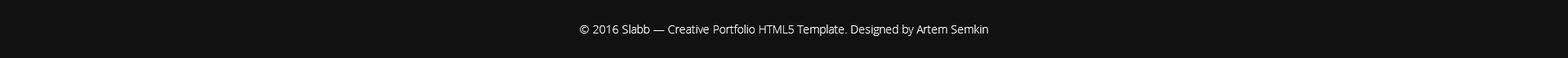
<style>
.page{position:relative;width:1568px;height:58px;background:#111111}
.page>*{position:absolute;margin:0}
.t1{font:11.4px "OpenSans-Light";color:#ffffff}
</style>
<div class="page">
<p class="t1" style="left:580px;top:24px;width:408px;height:12px">© 2016 Slabb — Creative Portfolio HTML5 Template. Designed by Artem Semkin</p>
</div>
